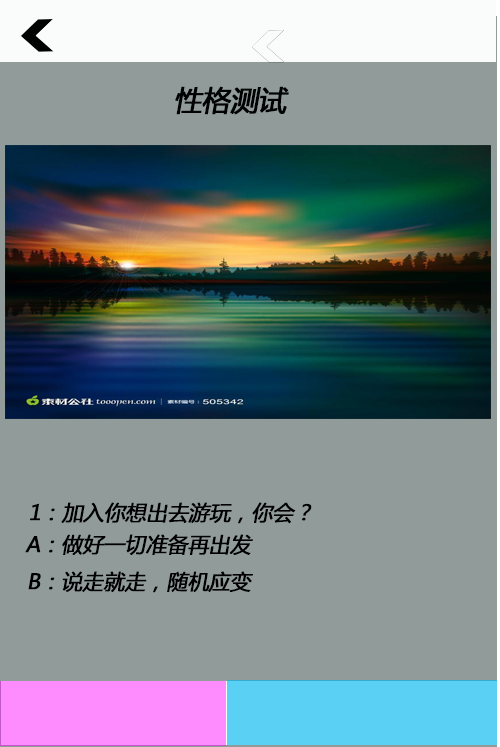
<style>
.page{position:relative;width:500px;height:747px;background:#919c9a}
.page>*{position:absolute;margin:0}
.t1{font:48px "MicrosoftYaHei";letter-spacing:-0.025em;color:#000101;font-weight:bold;font-style:italic}
.t2{font:36px "MicrosoftYaHei";letter-spacing:-0.025em;color:#000000;font-weight:bold;font-style:italic}
</style>
<div class="page">
<p class="t1" style="left:175px;top:86px;width:114px;height:29px">性格测试</p>
<p class="t2" style="left:30px;top:502px;width:282px;height:22px">1：加入你想出去游玩，你会？</p>
<p class="t2" style="left:25px;top:534px;width:228px;height:21px">A：做好一切准备再出发</p>
<p class="t2" style="left:28px;top:571px;width:225px;height:22px">B：说走就走，随机应变</p>
</div>
